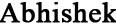
<style>
.page{position:relative;width:116px;height:25px;background:#ffffff}
.page>*{position:absolute;margin:0}
.t1{font:29.3px "TimesNewRomanPSMT";color:#020000;font-weight:bold}
</style>
<div class="page">
<p class="t1" style="left:0px;top:2px;width:118px;height:21px">Abhishek</p>
</div>
